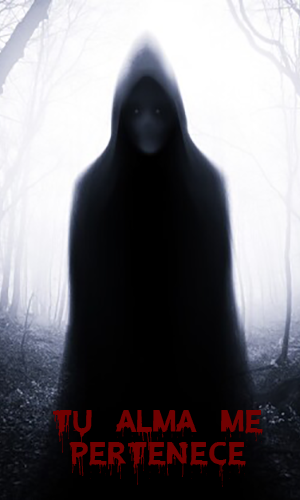
<style>
.page{position:relative;width:300px;height:500px}
.page>*{position:absolute;margin:0}
.t1{font:48px/32px "BloodLust";letter-spacing:-0.01em;color:#710101}
</style>
<div class="page">
<p class="t1" style="left:53px;top:410px;width:210px;height:77px;text-align:center">Tu alma me<br>pertenece</p>
</div>
